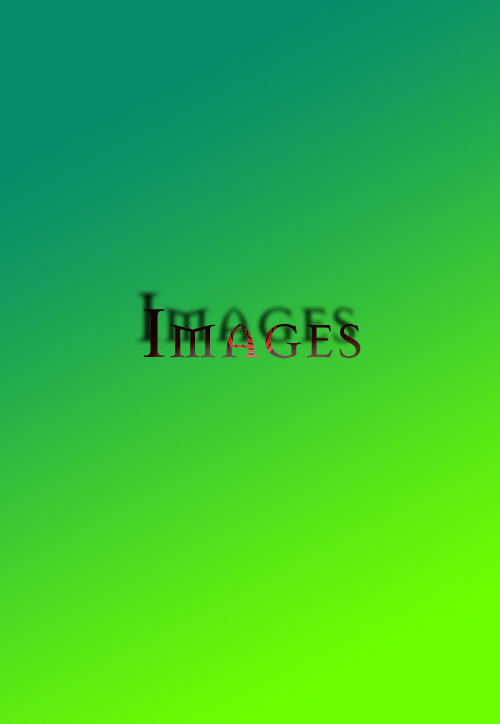
<style>
.page{position:relative;width:500px;height:724px}
.page>*{position:absolute;margin:0}
.t1{font:72px "MansonRegular"}
.t2{font:72px "TimesNewRomanPSMT"}
</style>
<div class="page">
<p class="t1" style="left:143px;top:309px;width:218px;height:50px"><span class="t2">I</span>mages</p>
</div>
